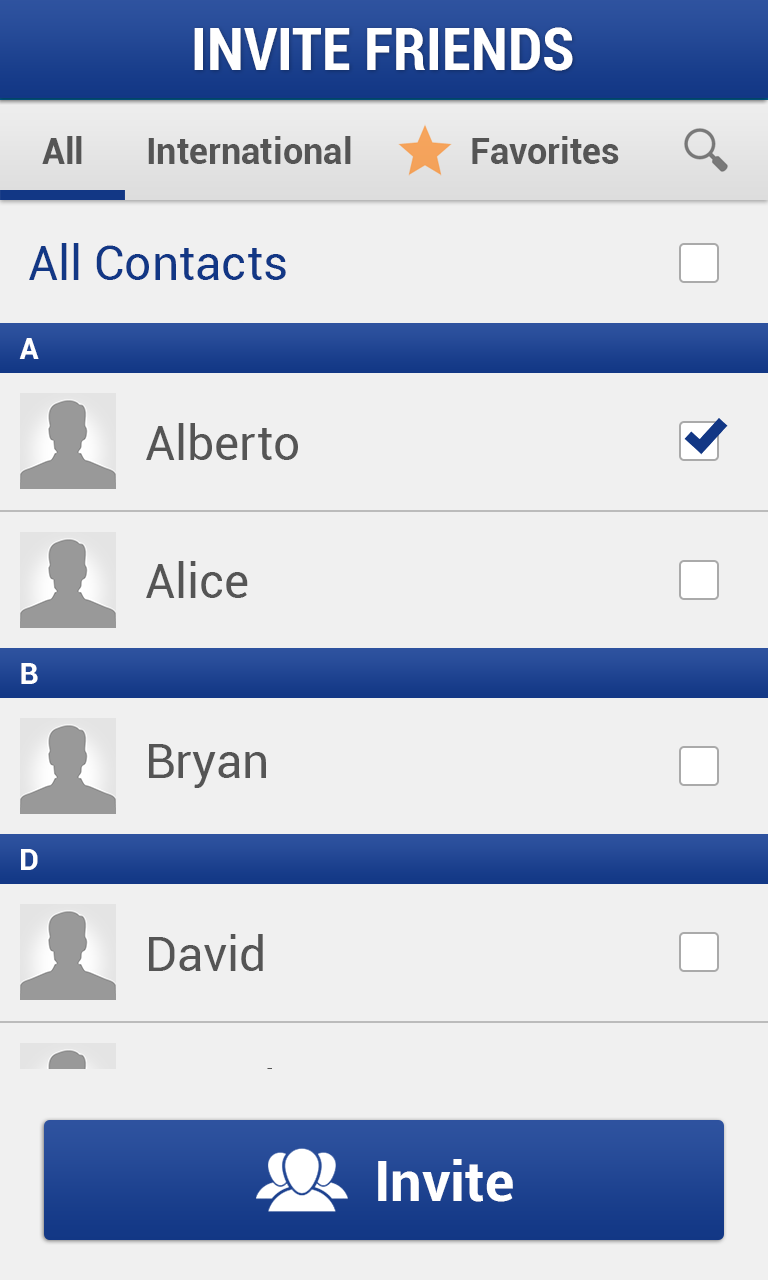
<style>
.page{position:relative;width:768px;height:1280px;background:#f0f0f0}
.page>*{position:absolute;margin:0}
.t1{font:60px "Roboto-BoldCondensed";color:#ffffff}
.t2{font:36px "Roboto-Bold";color:#555555}
.t3{font:48px "Roboto-Regular";color:#123785}
.t4{font:30px "Roboto-Bold";color:#ffffff}
.t5{font:48px "Roboto-Regular";color:#555555}
.t6{font:56px "Roboto-Bold";color:#ffffff}
</style>
<div class="page">
<p class="t1" style="left:194px;top:27px;width:379px;height:44px">INVITE FRIENDS</p>
<p class="t2" style="left:42px;top:136px;width:40px;height:28px">All</p>
<p class="t2" style="left:148px;top:136px;width:203px;height:28px">International</p>
<p class="t2" style="left:472px;top:136px;width:147px;height:28px">Favorites</p>
<p class="t3" style="left:29px;top:243px;width:257px;height:37px">All Contacts</p>
<p class="t4" style="left:19px;top:338px;width:20px;height:21px">A</p>
<p class="t5" style="left:146px;top:423px;width:152px;height:37px">Alberto</p>
<p class="t5" style="left:146px;top:561px;width:102px;height:37px">Alice</p>
<p class="t4" style="left:21px;top:663px;width:17px;height:21px">B</p>
<p class="t5" style="left:149px;top:744px;width:117px;height:44px">Bryan</p>
<p class="t4" style="left:21px;top:849px;width:17px;height:21px">D</p>
<p class="t5" style="left:149px;top:934px;width:114px;height:37px">David</p>
<p class="t6" style="left:378px;top:1159px;width:135px;height:43px">Invite</p>
</div>
